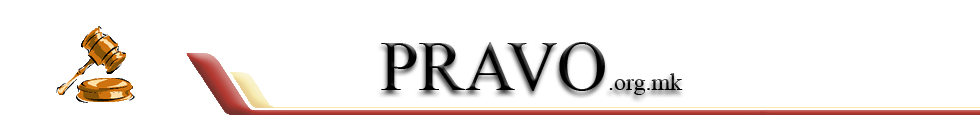
<style>
.page{position:relative;width:980px;height:120px;background:#ffffff}
.page>*{position:absolute;margin:0}
.t1{font:24px "TimesNewRomanPSMT";color:#000000}
.t2{font:70px "TimesNewRomanPSMT";color:#000000}
</style>
<div class="page">
<p class="t1" style="left:381px;top:42px;width:302px;height:53px"><span class="t2">PRAVO</span>.org.mk</p>
</div>
